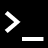
<style>
.page{position:relative;width:48px;height:48px;background:#000000}
.page>*{position:absolute;margin:0}
.t1{font:39px "Consolas-Bold";color:#ffffff}
</style>
<div class="page">
<p class="t1" style="left:4px;top:11px;width:40px;height:30px">&gt;_</p>
</div>
